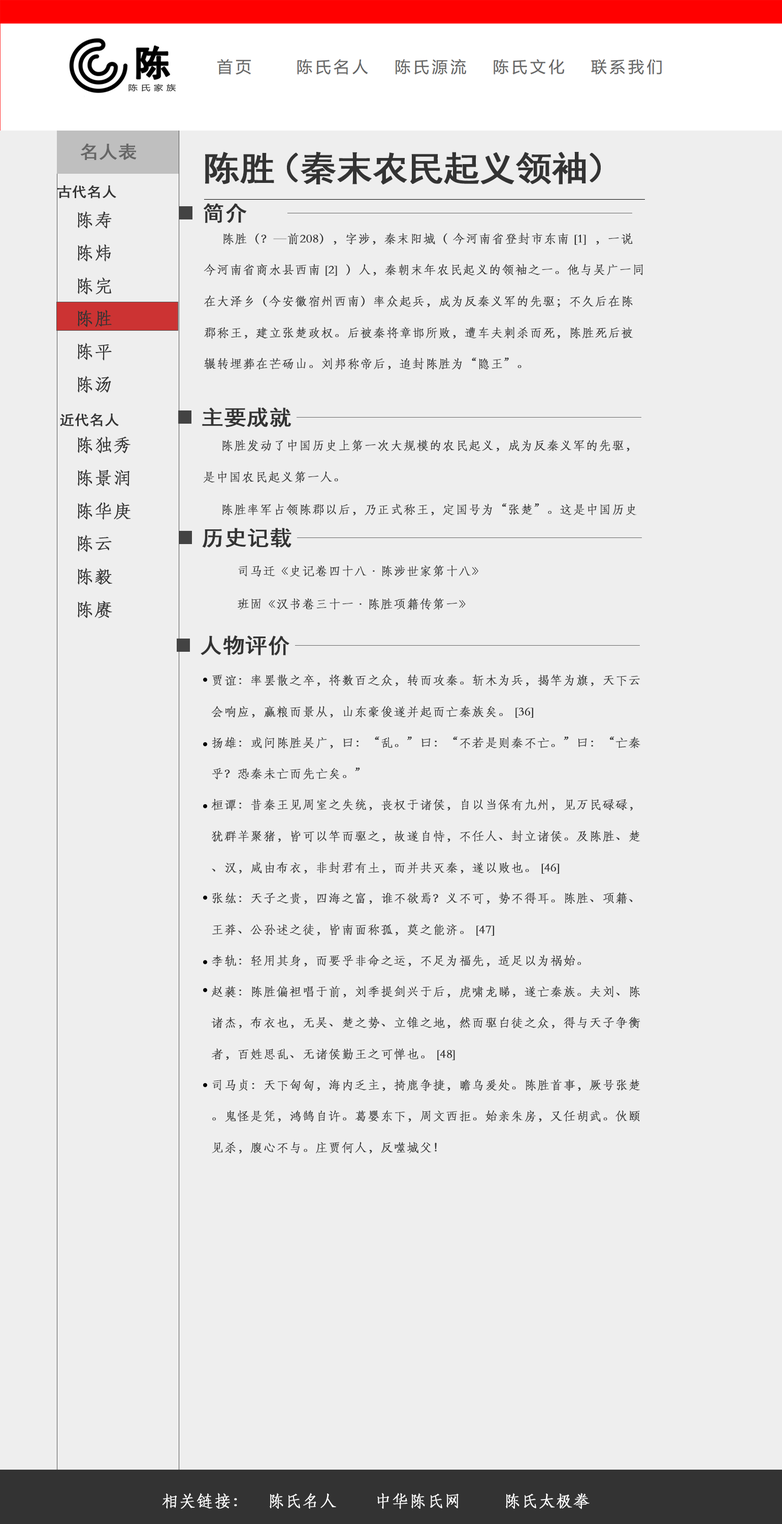
<style>
.page{position:relative;width:782px;height:1524px;background:#eeeeee}
.page>*{position:absolute;margin:0}
.t1{font:17.7px "SimHei";color:#666666;font-weight:bold;scale:1.05 1}
.t2{font:34.6px "SimHei";color:#333333;font-weight:bold;scale:1.05 1}
.t3{font:13.8px "SimHei";color:#333333;font-weight:bold;scale:1.05 1}
.t4{font:20.9px "SimHei";color:#333333;font-weight:bold;scale:1.05 1}
.t5{font:17.7px/31.3px "STFangsong";color:#333333;font-weight:bold;scale:1.05 1}
.t6{font:12.1px/31.3px "STFangsong";color:#333333;font-weight:bold;scale:1.05 1}
.t7{font:12.1px/31.3px "SimHei";color:#333333;font-weight:bold;scale:1.05 1}
.t8{font:16.1px "STFangsong";color:#ffffff;font-weight:bold;scale:1.05 1}
</style>
<div class="page">
<p class="t1" style="left:80px;top:143px;width:57px;height:17px">名人表</p>
<p class="t2" style="left:205px;top:152px;width:396px;height:32px">陈胜（秦末农民起义领袖）</p>
<p class="t3" style="left:57px;top:185px;width:59px;height:14px">古代名人</p>
<p class="t4" style="left:204px;top:203px;width:43px;height:20px">简介</p>
<p class="t5" style="left:78px;top:211px;width:34px;height:182px">陈寿<br>陈炜<br>陈完<br>陈胜<br>陈平<br>陈汤</p>
<p class="t6" style="left:204px;top:233px;width:439px;height:137px">陈胜（？—前208），字涉，秦末阳城（ 今河南省登封市东南 [1]  ，一说今河南省商水县西南 [2]  ）人，秦朝末年农民起义的领袖之一。他与吴广一同在大泽乡（今安徽宿州西南）率众起兵，成为反秦义军的先驱；不久后在陈郡称王，建立张楚政权。后被秦将章邯所败，遭车夫刺杀而死，陈胜死后被辗转埋葬在芒砀山。刘邦称帝后，追封陈胜为“隐王”。</p>
<p class="t3" style="left:60px;top:413px;width:59px;height:14px">近代名人</p>
<p class="t4" style="left:202px;top:407px;width:90px;height:20px">主要成就</p>
<p class="t5" style="left:78px;top:436px;width:53px;height:182px">陈独秀<br>陈景润<br>陈华庚<br>陈云<br>陈毅<br>陈赓</p>
<p class="t6" style="left:203px;top:439px;width:434px;height:77px">陈胜发动了中国历史上第一次大规模的农民起义，成为反秦义军的先驱，是中国农民起义第一人。<br>陈胜率军占领陈郡以后，乃正式称王，定国号为“张楚”。这是中国历史<span class="t7">上第一个由农民建立起来的政权。</span></p>
<p class="t4" style="left:202px;top:528px;width:90px;height:20px">历史记载</p>
<p class="t6" style="left:238px;top:565px;width:241px;height:45px">司马迁《史记卷四十八·陈涉世家第十八》<br>班固《汉书卷三十一·陈胜项籍传第一》</p>
<p class="t4" style="left:201px;top:636px;width:89px;height:19px">人物评价</p>
<p class="t6" style="left:211px;top:674px;width:430px;height:480px">贾谊：率罢散之卒，将数百之众，转而攻秦。斩木为兵，揭竿为旗，天下云会响应，赢粮而景从，山东豪俊遂并起而亡秦族矣。 [36] <br>扬雄：或问陈胜吴广，曰：“乱。”曰：“不若是则秦不亡。”曰：“亡秦乎？恐秦未亡而先亡矣。”<br>桓谭：昔秦王见周室之失统，丧权于诸侯，自以当保有九州，见万民碌碌，犹群羊聚猪，皆可以竿而驱之，故遂自恃，不任人、封立诸侯。及陈胜、楚、汉，咸由布衣，非封君有土，而并共灭秦，遂以败也。 [46] <br>张纮：天子之贵，四海之富，谁不欲焉？义不可，势不得耳。陈胜、项籍、王莽、公孙述之徒，皆南面称孤，莫之能济。 [47] <br>李轨：轻用其身，而要乎非命之运，不足为福先，适足以为祸始。<br>赵蕤：陈胜偏袒唱于前，刘季提剑兴于后，虎啸龙睇，遂亡秦族。夫刘、陈诸杰，布衣也，无吴、楚之势、立锥之地，然而驱白徒之众，得与天子争衡者，百姓思乱、无诸侯勤王之可惮也。 [48] <br>司马贞：天下匈匈，海内乏主，掎鹿争捷，瞻乌爰处。陈胜首事，厥号张楚。鬼怪是凭，鸿鹄自许。葛婴东下，周文西拒。始亲朱房，又任胡武。伙颐见杀，腹心不与。庄贾何人，反噬城父！<br>何去非：方陈胜之首事，而天下豪杰争西向而诛秦也。盖振臂一呼而带甲者百万，举麾一号而下城者数十。又类皆山林倔起之匹夫，其存亡胜败之机取决于一战，其锋至锐也。</p>
<p class="t8" style="left:162px;top:1493px;width:428px;height:16px">相关链接：    陈氏名人        中华陈氏网         陈氏太极拳</p>
</div>
